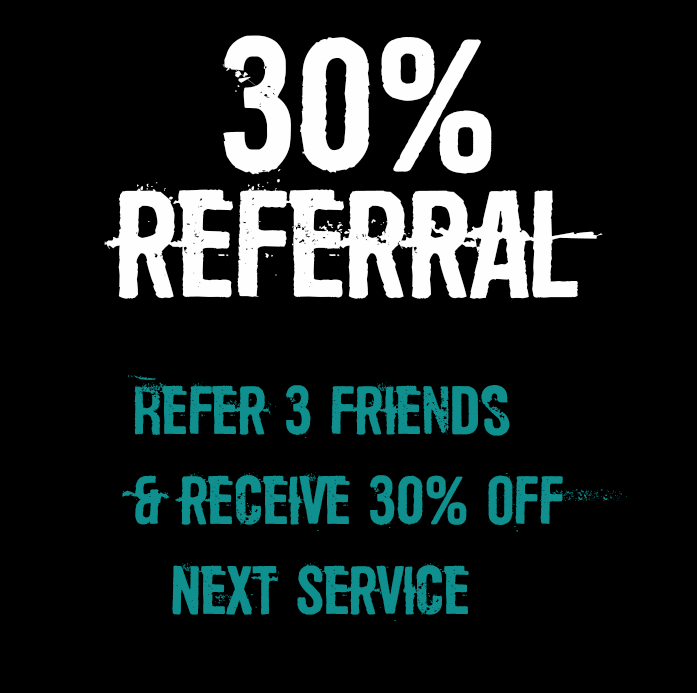
<style>
.page{position:relative;width:697px;height:693px;background:#000000}
.page>*{position:absolute;margin:0}
.t1{font:208.3px "SonicBarrier";color:#fefefe}
.t2{font:166.7px "SonicBarrier";color:#fefefe}
.t3{font:75px "SonicBarrier";color:#0f908e}
</style>
<div class="page">
<p class="t1" style="left:222px;top:35px;width:270px;height:148px">30%</p>
<p class="t2" style="left:104px;top:182px;width:499px;height:117px">referral</p>
<p class="t3" style="left:122px;top:375px;width:505px;height:246px">Refer 3 friends<br>   &amp; receive 30% off <br>     Next Service</p>
</div>
